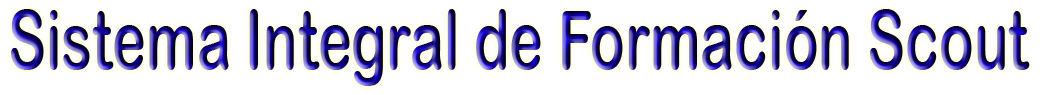
<style>
.page{position:relative;width:1049px;height:95px;background:#ffffff}
.page>*{position:absolute;margin:0}
.t1{font:81.7px "ArialRoundedMTBold";scale:0.7 1}
</style>
<div class="page">
<p class="t1" style="left:11px;top:9px;width:1019px;height:77px">Sistema Integral de Formación Scout</p>
</div>
